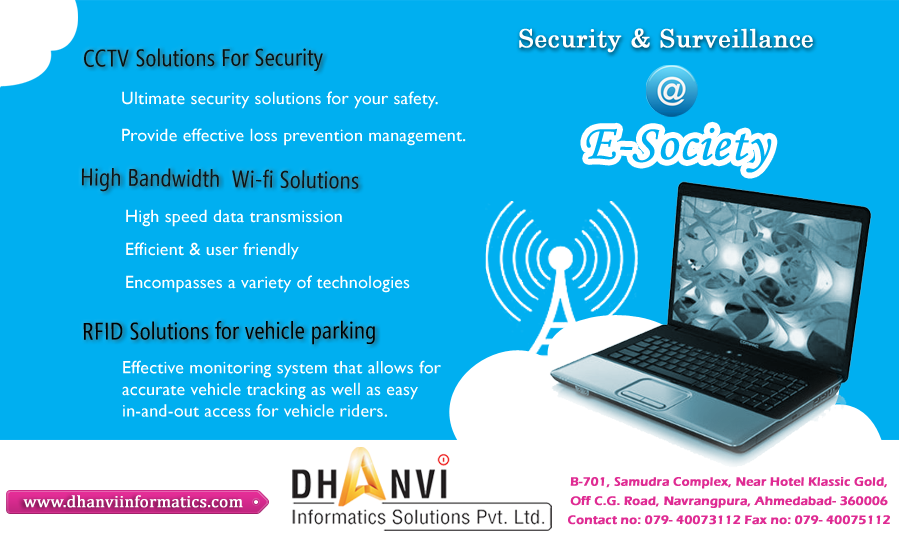
<style>
.page{position:relative;width:899px;height:535px;background:#00aff0}
.page>*{position:absolute;margin:0}
.t1{font:25px "Century";letter-spacing:0.01em;color:#ffffff;font-weight:bold}
.t2{font:24px "SegoeCondensed";letter-spacing:0.01em;color:#0b110f}
.t3{font:18px "GillSansMT";letter-spacing:0.01em;color:#ffffff}
.t4{font:50px "MonotypeCorsiva";letter-spacing:0.01em;color:#00aff0;font-weight:bold}
.t5{font:24px "SegoeCondensed";letter-spacing:0.01em;color:#101415}
.t6{font:18px/30px "GillSansMT";letter-spacing:0.01em;color:#ffffff}
.t7{font:24px "SegoeCondensed";letter-spacing:0.01em;color:#010101}
.t8{font:12.5px "ErasITC-Demi";letter-spacing:0.01em;color:#df2c93;font-weight:bold}
.t9{font:16.7px "CambriaMath";letter-spacing:0.01em;color:#ffffff;font-weight:bold}
</style>
<div class="page">
<p class="t1" style="left:519px;top:28px;width:294px;height:25px">Security &amp; Surveillance</p>
<p class="t2" style="left:84px;top:48px;width:239px;height:23px">CCTV Solutions For Security</p>
<p class="t3" style="left:122px;top:91px;width:316px;height:18px">Ultimate security solutions for your safety.</p>
<p class="t3" style="left:122px;top:128px;width:344px;height:18px">Provide effective loss prevention management.</p>
<p class="t4" style="left:586px;top:127px;width:186px;height:46px;rotate:1deg">E-Society</p>
<p class="t5" style="left:82px;top:168px;width:277px;height:24px;rotate:1deg">High Bandwidth  Wi-fi Solutions</p>
<p class="t6" style="left:126px;top:209px;width:284px;height:84px">High speed data transmission<br>Efficient &amp; user friendly<br>Encompasses a variety of technologies</p>
<p class="t7" style="left:83px;top:320px;width:292px;height:25px">RFID Solutions for vehicle parking</p>
<p class="t3" style="left:122px;top:360px;width:319px;height:57px">Effective monitoring system that allows for accurate vehicle tracking as well as easy in-and-out access for vehicle riders.</p>
<p class="t8" style="left:568px;top:477px;width:322px;height:48px;text-align:center">B-701, Samudra Complex, Near Hotel Klassic Gold,<br>Off C.G. Road, Navrangpura, Ahmedabad- 360006<br>Contact no: 079- 40073112 Fax no: 079- 40075112</p>
<p class="t9" style="left:23px;top:495px;width:220px;height:13px">www.dhanviinformatics.com</p>
</div>
